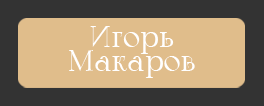
<style>
.page{position:relative;width:264px;height:106px;background:#e0bd8b}
.page>*{position:absolute;margin:0}
.t1{font:30px/24px "Calypso-Regular";color:#ffffff}
</style>
<div class="page">
<p class="t1" style="left:69px;top:26px;width:126px;height:52px;text-align:center">Игорь<br>Макаров</p>
</div>
